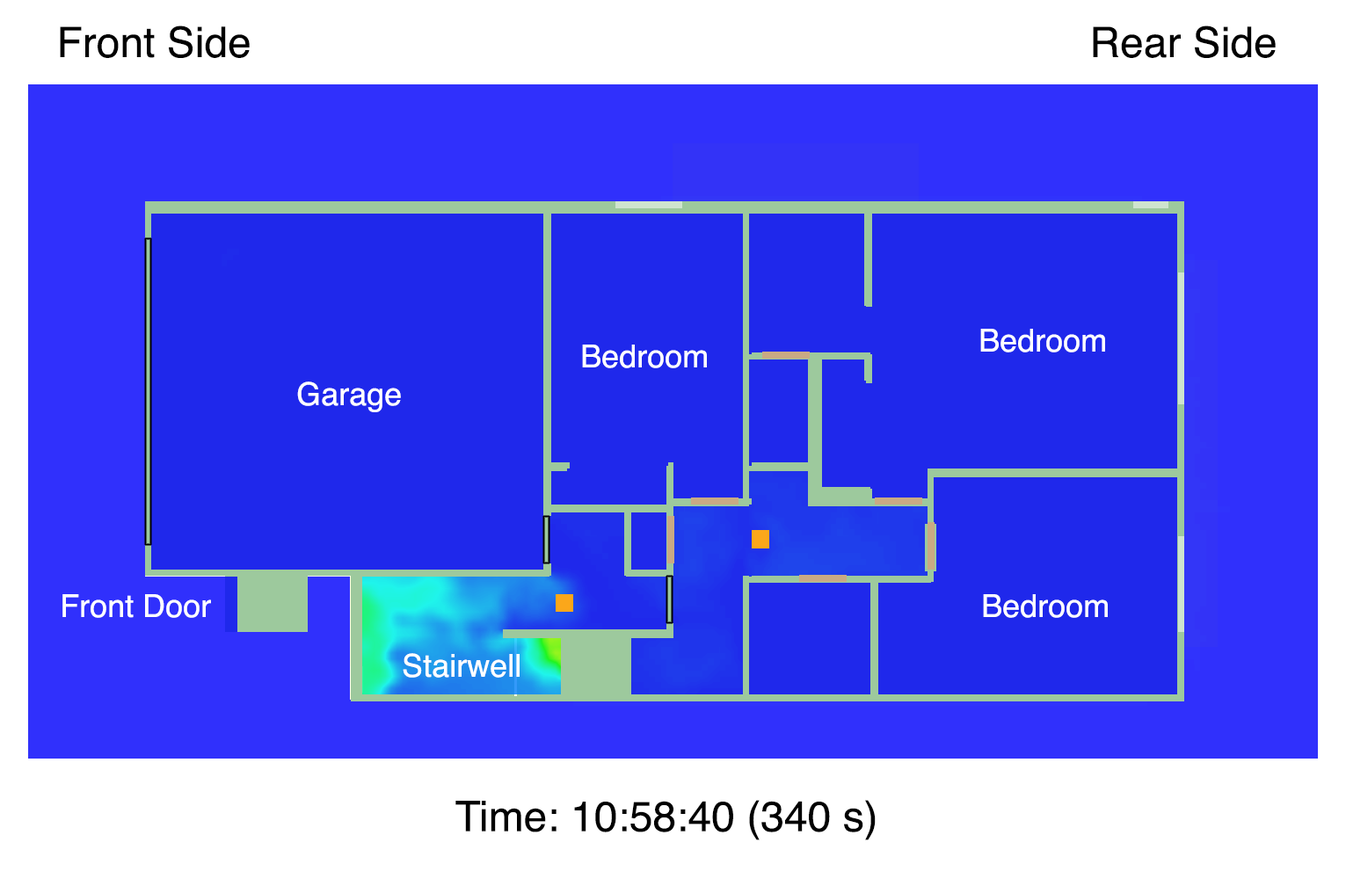
<style>
.page{position:relative;width:1346px;height:886px;background:#1f28eb}
.page>*{position:absolute;margin:0}
.t1{font:42.2px "Helvetica";color:#000000}
.t2{font:31.6px "Helvetica";color:#ffffff}
</style>
<div class="page">
<p class="t1" style="left:60px;top:25px;width:190px;height:33px">Front Side</p>
<p class="t1" style="left:1093px;top:25px;width:182px;height:33px">Rear Side</p>
<p class="t2" style="left:980px;top:329px;width:125px;height:23px">Bedroom</p>
<p class="t2" style="left:582px;top:345px;width:125px;height:23px">Bedroom</p>
<p class="t2" style="left:297px;top:381px;width:104px;height:31px">Garage</p>
<p class="t2" style="left:62px;top:594px;width:149px;height:24px">Front Door</p>
<p class="t2" style="left:983px;top:594px;width:125px;height:24px">Bedroom</p>
<p class="t2" style="left:403px;top:653px;width:117px;height:25px">Stairwell</p>
<p class="t1" style="left:455px;top:800px;width:421px;height:40px">Time: 10:58:40 (340 s)</p>
</div>
